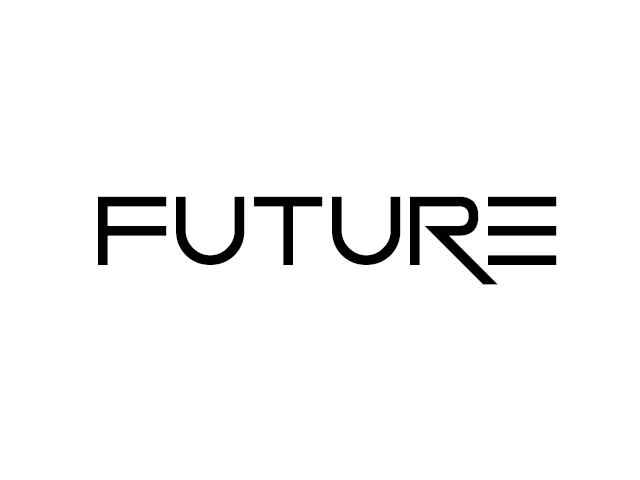
<style>
.page{position:relative;width:640px;height:480px;background:#ffffff}
.page>*{position:absolute;margin:0}
.t1{font:100px "VerminVibes2";color:#000000}
</style>
<div class="page">
<p class="t1" style="left:98px;top:196px;width:459px;height:89px">FUTURE</p>
</div>
